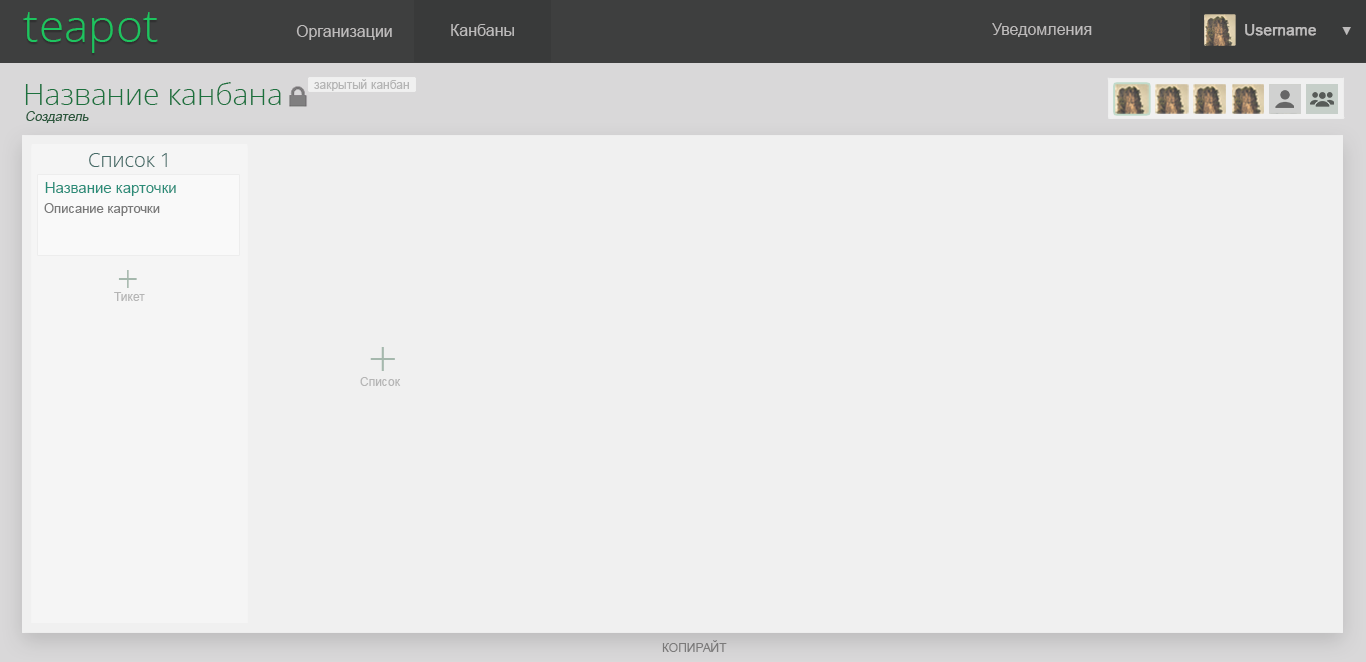
<style>
.page{position:relative;width:1366px;height:662px;background:#f0f0f0}
.page>*{position:absolute;margin:0}
.t1{font:46px "OpenSans-Light";color:#1dc45f}
.t2{font:16px "ArialMT";color:#bdbbbb}
.t3{font:15px "ArialMT";color:#bdbbbb;font-weight:bold}
.t4{font:12.3px "ArialMT";color:#bdbbbb}
.t5{font:30px "OpenSans-Light";color:#1c713e}
.t6{font:12px "ArialMT";color:#b5b5b5}
.t7{font:13px "ArialMT";color:#2c583d;font-style:italic}
.t8{font:20px "OpenSans-Light";color:#456b68}
.t9{font:15px "ArialMT";color:#2a8c78}
.t10{font:13px "ArialMT";color:#797979}
.t11{font:38px "OpenSans-Light";color:#a5b8ad}
.t12{font:52px "OpenSans-Light";color:#a5b8ad}
.t13{font:12px "ArialMT";color:#7b7a7a}
</style>
<div class="page">
<p class="t1" style="left:23px;top:12px;width:135px;height:41px">teapot</p>
<p class="t2" style="left:296px;top:25px;width:96px;height:15px">Организации</p>
<p class="t2" style="left:451px;top:24px;width:63px;height:12px">Канбаны</p>
<p class="t2" style="left:992px;top:23px;width:100px;height:14px">Уведомления</p>
<p class="t3" style="left:1245px;top:24px;width:71px;height:12px">Username</p>
<p class="t4" style="left:1342px;top:27px;width:9px;height:8px">▼</p>
<p class="t5" style="left:25px;top:82px;width:256px;height:23px">Название канбана</p>
<p class="t6" style="left:314px;top:79px;width:95px;height:12px">закрытый канбан</p>
<p class="t7" style="left:26px;top:111px;width:63px;height:12px">Создатель</p>
<p class="t8" style="left:89px;top:153px;width:78px;height:14px">Список 1</p>
<p class="t9" style="left:45px;top:182px;width:131px;height:14px">Название карточки</p>
<p class="t10" style="left:44px;top:203px;width:116px;height:13px">Описание карточки</p>
<p class="t11" style="left:118px;top:270px;width:19px;height:18px">+</p>
<p class="t6" style="left:114px;top:292px;width:31px;height:9px">Тикет</p>
<p class="t12" style="left:370px;top:347px;width:25px;height:24px">+</p>
<p class="t6" style="left:360px;top:377px;width:41px;height:9px">Список</p>
<p class="t13" style="left:662px;top:640px;width:65px;height:12px">КОПИРАЙТ</p>
</div>
